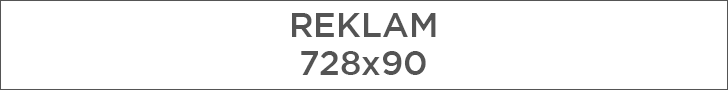
<style>
.page{position:relative;width:728px;height:90px;background:#ffffff}
.page>*{position:absolute;margin:0}
.t1{font:34px/38px "Gotham-Medium";color:#545454}
</style>
<div class="page">
<p class="t1" style="left:292px;top:13px;width:144px;height:62px;text-align:center">REKLAM <br>728x90</p>
</div>
